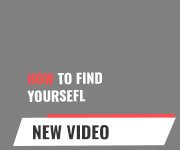
<style>
.page{position:relative;width:180px;height:150px;background:#808080}
.page>*{position:absolute;margin:0}
.t1{font:14px/17.3px "Oswald-Bold";color:#ffffff;text-transform:uppercase}
.t2{font:14px/17.3px "Oswald-Bold";color:#fb4c4e;text-transform:uppercase}
.t3{font:17.3px "Oswald-Bold";color:#353535;text-transform:uppercase}
</style>
<div class="page">
<p class="t1" style="left:27px;top:72px;width:75px;height:30px;rotate:-1deg"><span class="t2">How</span> to find <br>yoursefl</p>
<p class="t3" style="left:33px;top:125px;width:76px;height:15px">New video</p>
</div>
